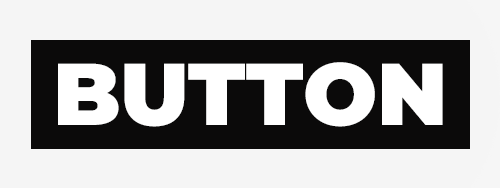
<style>
.page{position:relative;width:500px;height:188px;background:#f5f5f5}
.page>*{position:absolute;margin:0}
.t1{font:87.6px "Montserrat-Black";color:#ffffff;text-transform:uppercase}
</style>
<div class="page">
<p class="t1" style="left:58px;top:62px;width:385px;height:65px">button</p>
</div>
